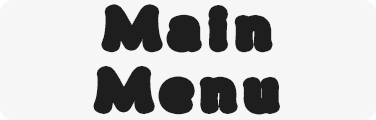
<style>
.page{position:relative;width:376px;height:120px;background:#f6f6f6}
.page>*{position:absolute;margin:0}
.t1{font:50px/61.6px "MaiandraGD-Regular";letter-spacing:0.2em;color:#1e1e1e;font-weight:bold;scale:1.11 1}
</style>
<div class="page">
<p class="t1" style="left:99px;top:10px;width:175px;height:99px;text-align:center">Main<br>Menu</p>
</div>
